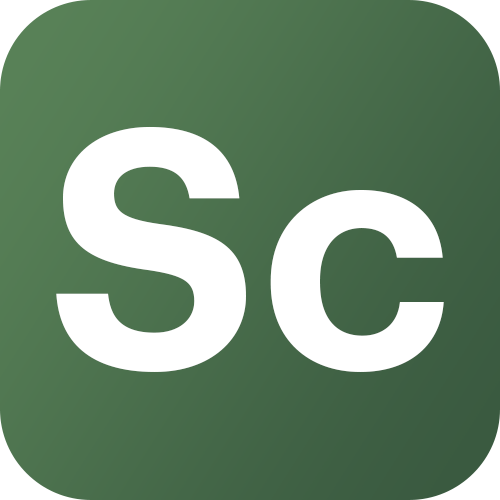
<style>
.page{position:relative;width:500px;height:500px}
.page>*{position:absolute;margin:0}
.t1{font:333.3px "Graphik-Semibold";color:#ffffff}
</style>
<div class="page">
<p class="t1" style="left:56px;top:126px;width:388px;height:246px">Sc</p>
</div>
